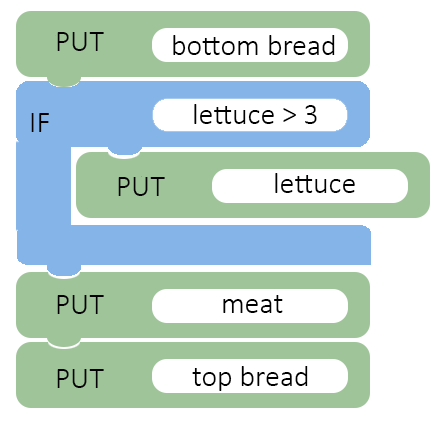
<style>
.page{position:relative;width:438px;height:422px;background:#ffffff}
.page>*{position:absolute;margin:0}
.t1{font:30px "Calibri-Light";color:#000000}
</style>
<div class="page">
<p class="t1" style="left:57px;top:32px;width:47px;height:19px">PUT</p>
<p class="t1" style="left:173px;top:35px;width:162px;height:20px">bottom bread</p>
<p class="t1" style="left:31px;top:113px;width:18px;height:19px">IF</p>
<p class="t1" style="left:194px;top:104px;width:123px;height:20px">lettuce &gt; 3</p>
<p class="t1" style="left:275px;top:173px;width:80px;height:20px">lettuce</p>
<p class="t1" style="left:118px;top:177px;width:47px;height:19px">PUT</p>
<p class="t1" style="left:57px;top:295px;width:47px;height:19px">PUT</p>
<p class="t1" style="left:223px;top:295px;width:60px;height:18px">meat</p>
<p class="t1" style="left:192px;top:366px;width:116px;height:25px">top bread</p>
<p class="t1" style="left:57px;top:369px;width:47px;height:19px">PUT</p>
</div>
